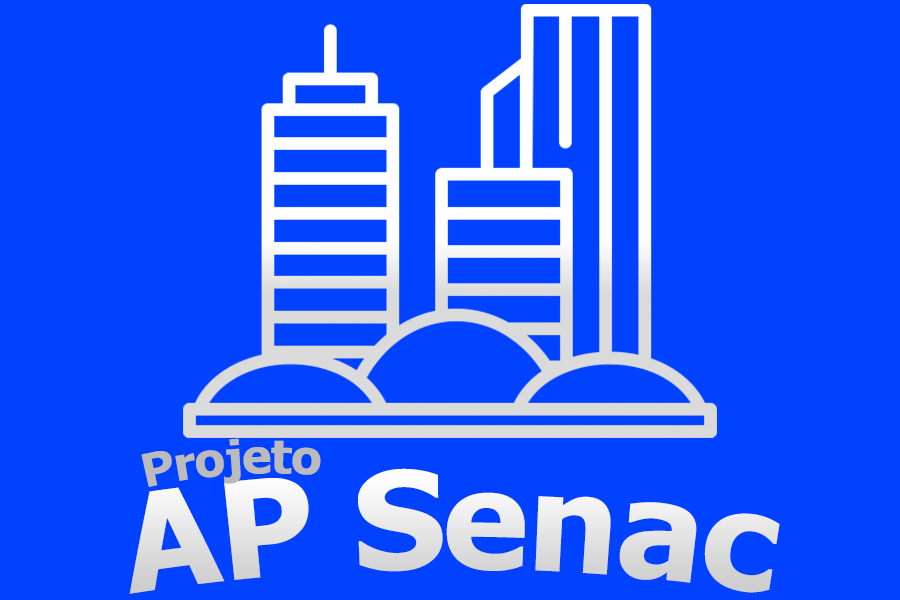
<style>
.page{position:relative;width:900px;height:600px;background:#0042ff}
.page>*{position:absolute;margin:0}
.t1{font:45.7px "Tahoma-Bold";color:#bbbbbb}
.t2{font:134.6px "Tahoma-Bold";color:#e5e5e5}
</style>
<div class="page">
<p class="t1" style="left:141px;top:438px;width:180px;height:49px;rotate:-4deg">Projeto</p>
<p class="t2" style="left:129px;top:468px;width:651px;height:126px">AP Senac</p>
</div>
